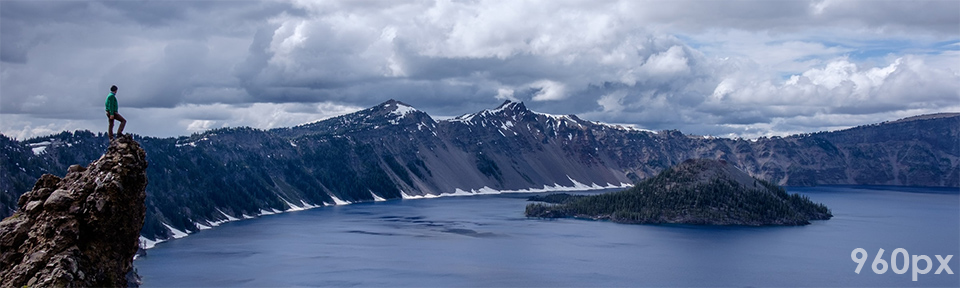
<style>
.page{position:relative;width:960px;height:288px}
.page>*{position:absolute;margin:0}
.t1{font:36px "CenturyGothic-Bold";color:#bac1d2}
</style>
<div class="page">
<p class="t1" style="left:851px;top:248px;width:103px;height:33px">960px</p>
</div>
